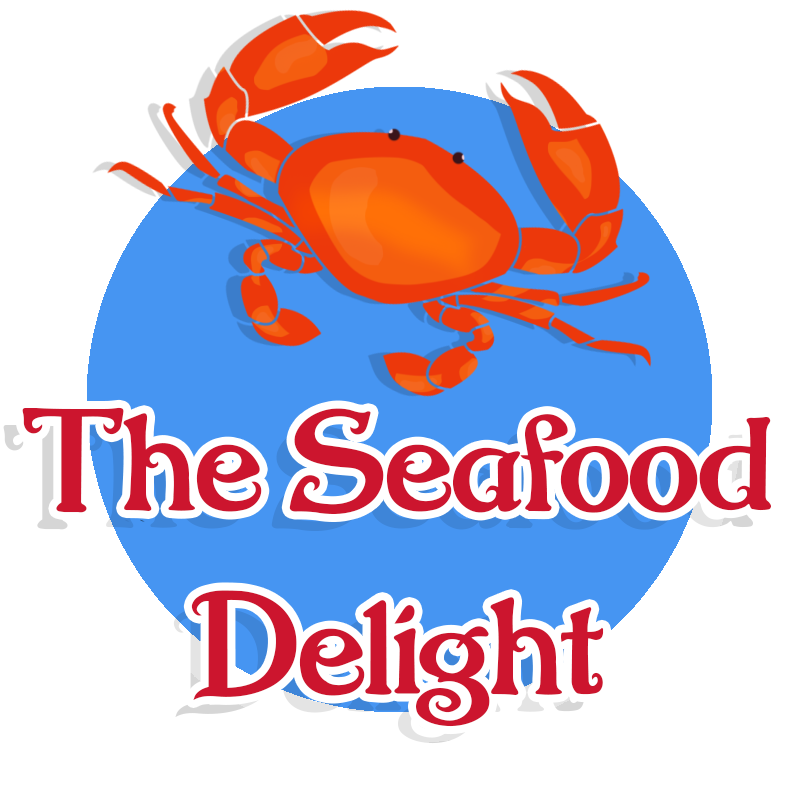
<style>
.page{position:relative;width:800px;height:800px;background:#ffffff}
.page>*{position:absolute;margin:0}
.t1{font:141.7px/184px "NugieRomantic";letter-spacing:-0.01em;color:#cc152e}
</style>
<div class="page">
<p class="t1" style="left:22px;top:407px;width:749px;height:320px;text-align:center">The Seafood<br>Delight</p>
</div>
